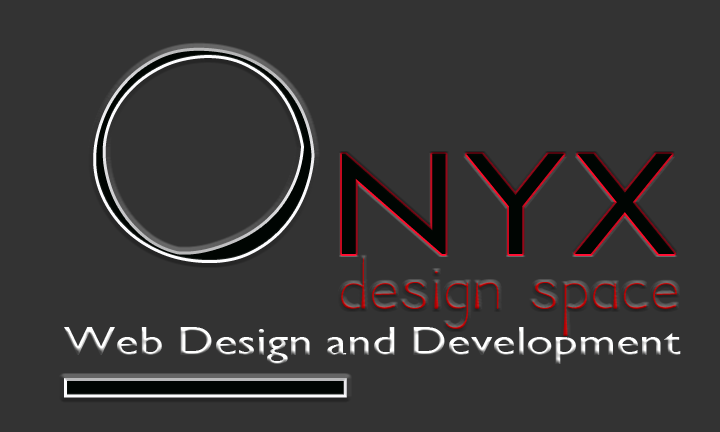
<style>
.page{position:relative;width:720px;height:432px;background:#333333}
.page>*{position:absolute;margin:0}
.t1{font:138.9px "CenturyGothic";color:#000502;scale:1.31 1}
.t2{font:46.8px "Diligent";color:#b90102;scale:1.15 1}
.t3{font:40.4px "GillSansMT";scale:1.22 1}
</style>
<div class="page">
<p class="t1" style="left:342px;top:154px;width:333px;height:100px">NYX</p>
<p class="t2" style="left:341px;top:257px;width:336px;height:79px">Design Space</p>
<p class="t3" style="left:64px;top:327px;width:617px;height:37px">Web Design and Development</p>
</div>
